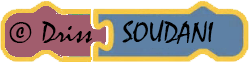
<style>
.page{position:relative;width:249px;height:62px;background:#a15d6d}
.page>*{position:absolute;margin:0}
.t1{font:30px "Mistral";color:#000000}
</style>
<div class="page">
<p class="t1" style="left:9px;top:20px;width:205px;height:24px">© Driss    SOUDANI</p>
</div>
